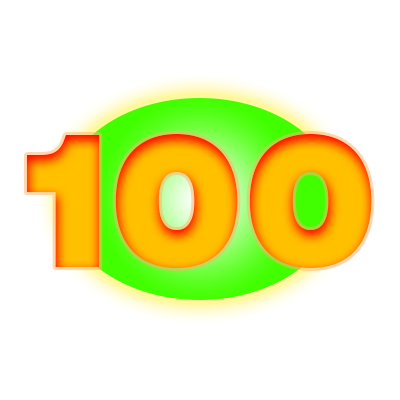
<style>
.page{position:relative;width:400px;height:400px;background:#ffffff}
.page>*{position:absolute;margin:0}
.t1{font:187.5px "Garet-Heavy";color:#ffc000}
</style>
<div class="page">
<p class="t1" style="left:26px;top:134px;width:346px;height:134px">100</p>
</div>
